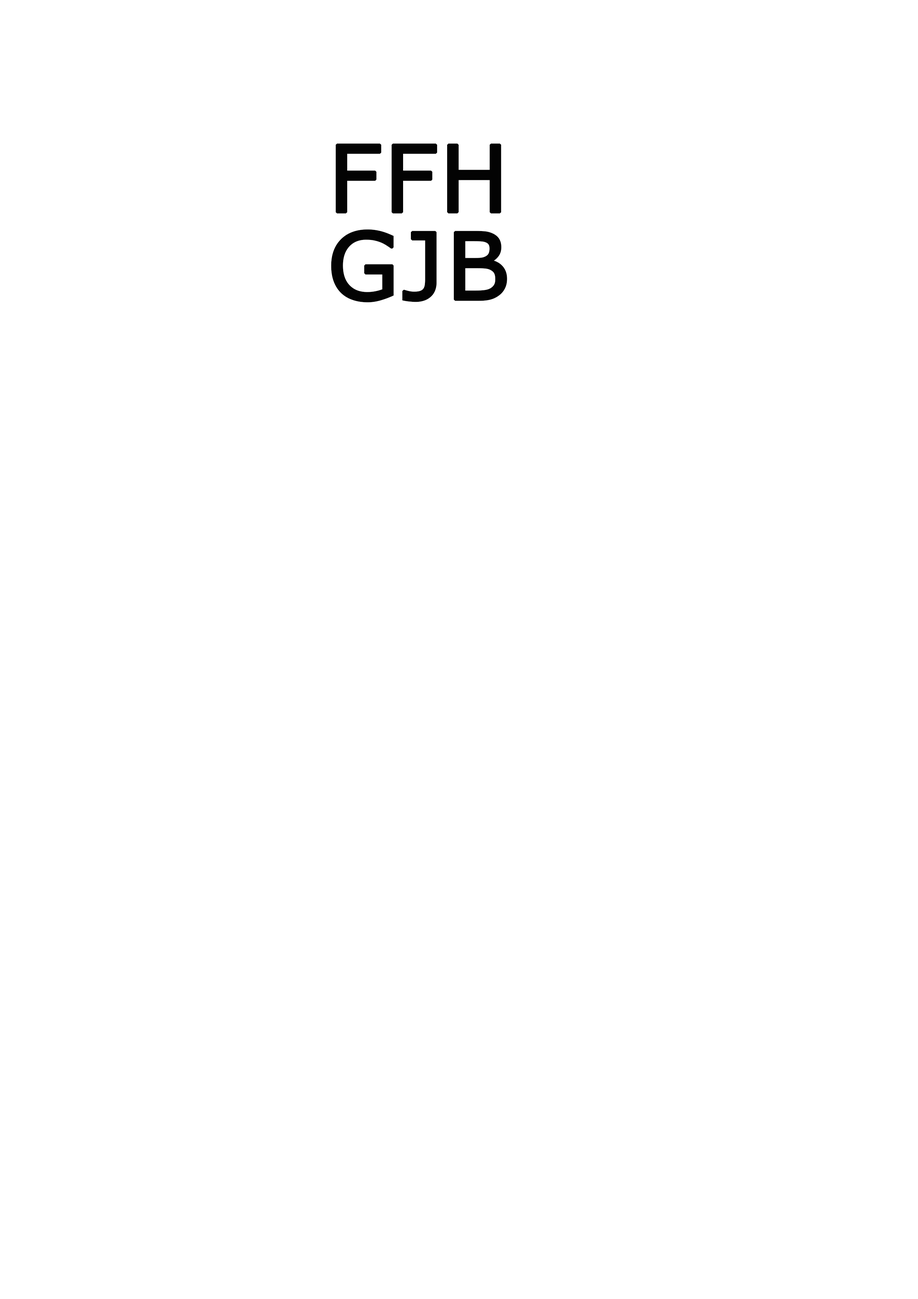
<style>
.page{position:relative;width:918px;height:1299px;background:#ffffff}
.page>*{position:absolute;margin:0}
.t1{font:92.6px/15.4px "Verdana";color:#030303;font-weight:bold}
</style>
<div class="page">
<p class="t1" style="left:331px;top:143px;width:176px;height:159px;text-align:center">FFH<br>GJB</p>
</div>
